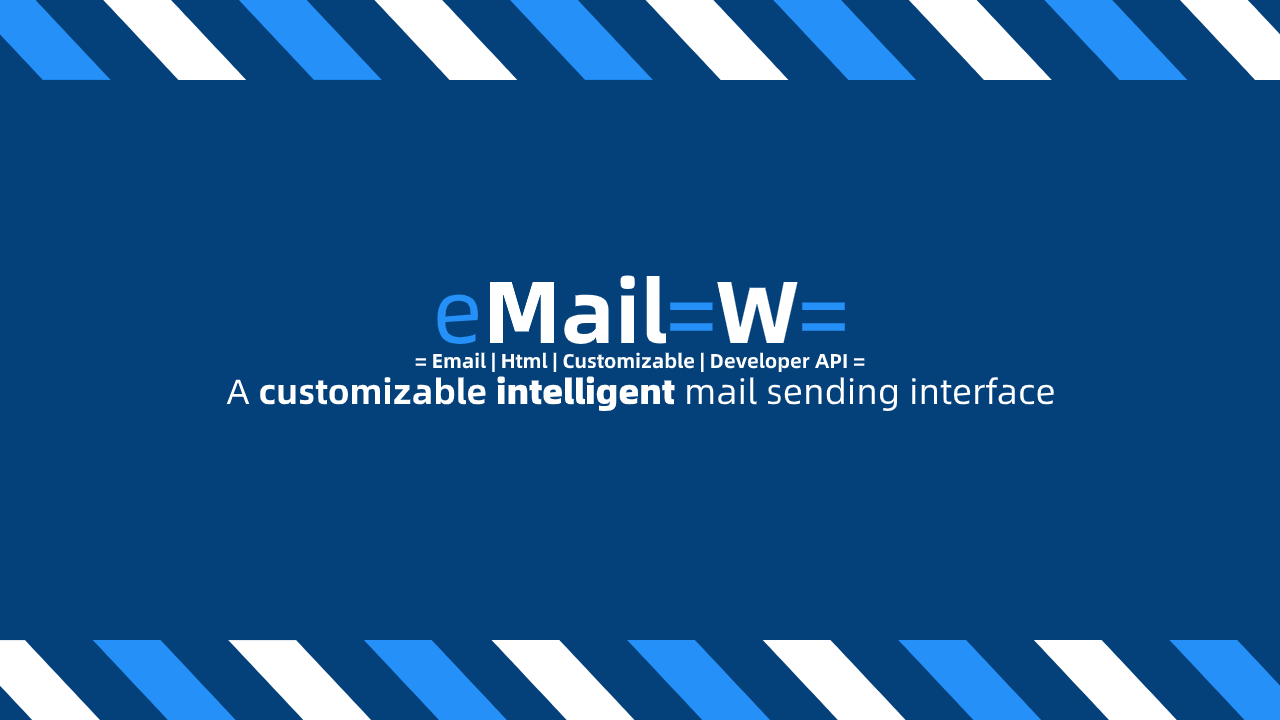
<style>
.page{position:relative;width:1280px;height:720px;background:#04417b}
.page>*{position:absolute;margin:0}
.t1{font:88px "AlibabaPuHuiTi-Bold";color:#ffffff}
.t2{font:88px "AlibabaPuHuiTi-Regular";color:#2490f8}
.t3{font:20px "AlibabaPuHuiTi-Bold";color:#ffffff}
.t4{font:35px "AlibabaPuHuiTi-Regular";color:#ffffff}
.t5{font:35px "AlibabaPuHuiTi-Bold";color:#ffffff}
.t6{font:35px "AlibabaPuHuiTi-Heavy";color:#ffffff}
</style>
<div class="page">
<p class="t1" style="left:437px;top:275px;width:408px;height:69px"><span class="t2">e</span>Mail<span class="t2">=</span>W<span class="t2">=</span></p>
<p class="t3" style="left:415px;top:352px;width:450px;height:20px">= Email | Html | Customizable | Developer API =</p>
<p class="t4" style="left:226px;top:376px;width:828px;height:35px">A <span class="t5">customizable </span><span class="t6">intelligent</span> mail sending interface</p>
</div>
